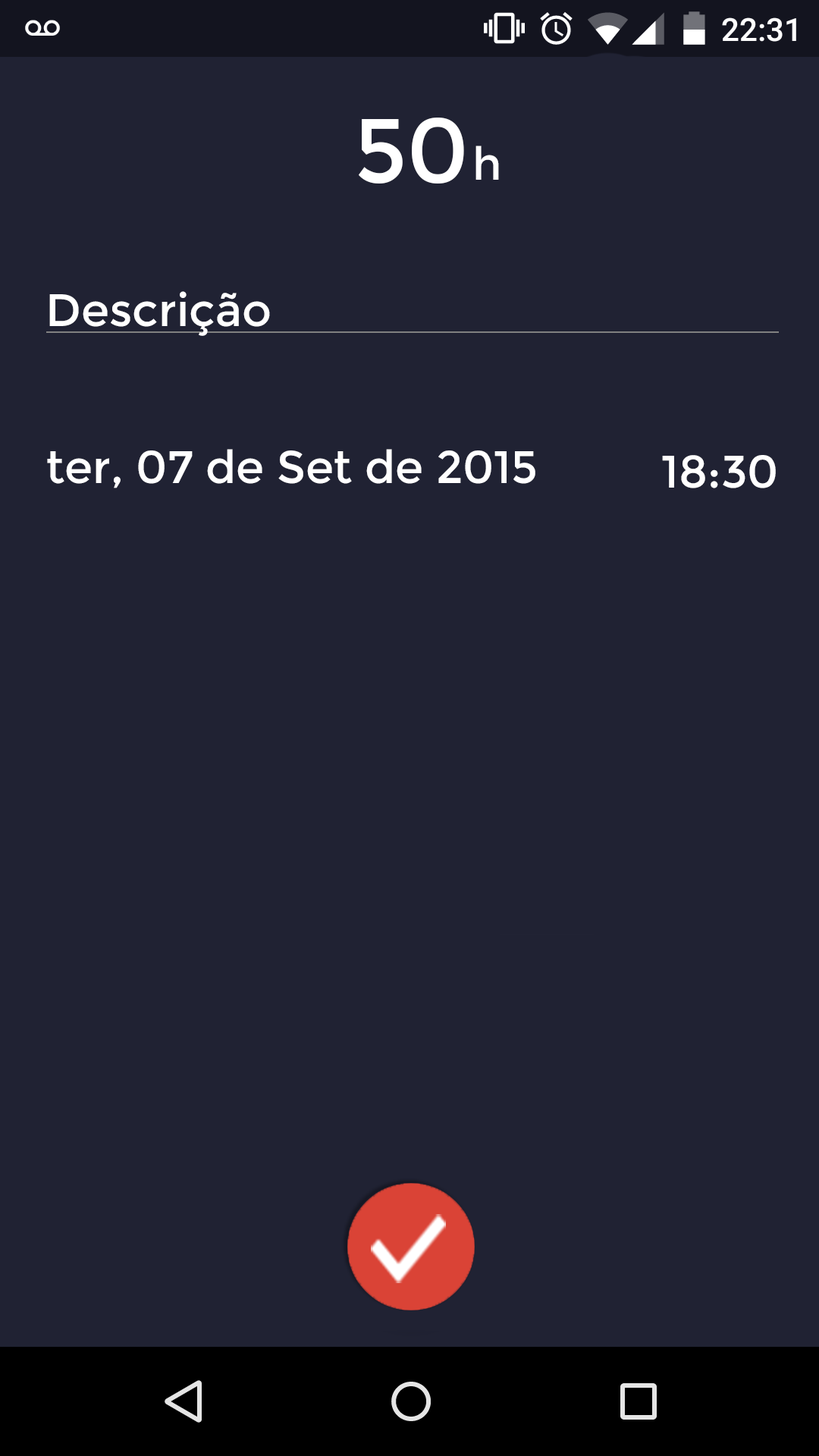
<style>
.page{position:relative;width:819px;height:1456px;background:#202233}
.page>*{position:absolute;margin:0}
.t1{font:91px "Montserrat-Regular";color:#ffffff}
.t2{font:45.5px "Montserrat-Regular";color:#ffffff}
</style>
<div class="page">
<p class="t1" style="left:359px;top:118px;width:105px;height:66px">50</p>
<p class="t2" style="left:475px;top:146px;width:24px;height:34px">h</p>
<p class="t2" style="left:49px;top:291px;width:221px;height:45px">Descrição</p>
<p class="t2" style="left:47px;top:449px;width:488px;height:39px">ter, 07 de Set de 2015</p>
<p class="t2" style="left:662px;top:455px;width:114px;height:33px">18:30</p>
</div>
